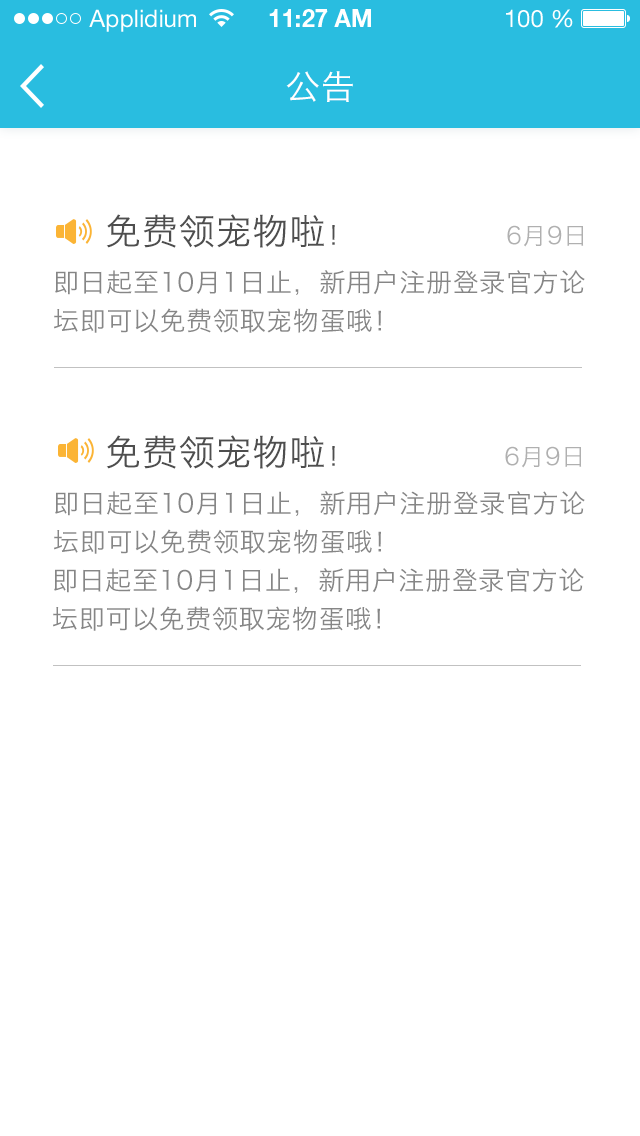
<style>
.page{position:relative;width:640px;height:1136px;background:#ffffff}
.page>*{position:absolute;margin:0}
.t1{font:34px "HiraginoSansGB-W3";letter-spacing:0.025em;color:#ffffff}
.t2{font:36px "HiraginoSansGB-W3";letter-spacing:0.025em;color:#4e4e4e}
.t3{font:26px "HiraginoSansGB-W3";letter-spacing:0.025em;color:#4e4e4e}
.t4{font:24px "HiraginoSansGB-W3";letter-spacing:0.025em;color:#b0b0b0}
.t5{font:26px/38.4px "HiraginoSansGB-W3";letter-spacing:0.025em;color:#868686}
</style>
<div class="page">
<p class="t1" style="left:286px;top:71px;width:67px;height:31px">公告</p>
<p class="t2" style="left:106px;top:214px;width:229px;height:34px">免费领宠物啦<span class="t3">！</span></p>
<p class="t4" style="left:507px;top:225px;width:77px;height:22px">6月9日</p>
<p class="t5" style="left:54px;top:270px;width:531px;height:63px">即日起至10月1日止，新用户注册登录官方论坛即可以免费领取宠物蛋哦！</p>
<p class="t2" style="left:106px;top:435px;width:229px;height:34px">免费领宠物啦<span class="t3">！</span></p>
<p class="t4" style="left:505px;top:446px;width:77px;height:22px">6月9日</p>
<p class="t5" style="left:54px;top:491px;width:531px;height:63px">即日起至10月1日止，新用户注册登录官方论坛即可以免费领取宠物蛋哦！</p>
<p class="t5" style="left:53px;top:568px;width:531px;height:63px">即日起至10月1日止，新用户注册登录官方论坛即可以免费领取宠物蛋哦！</p>
</div>
